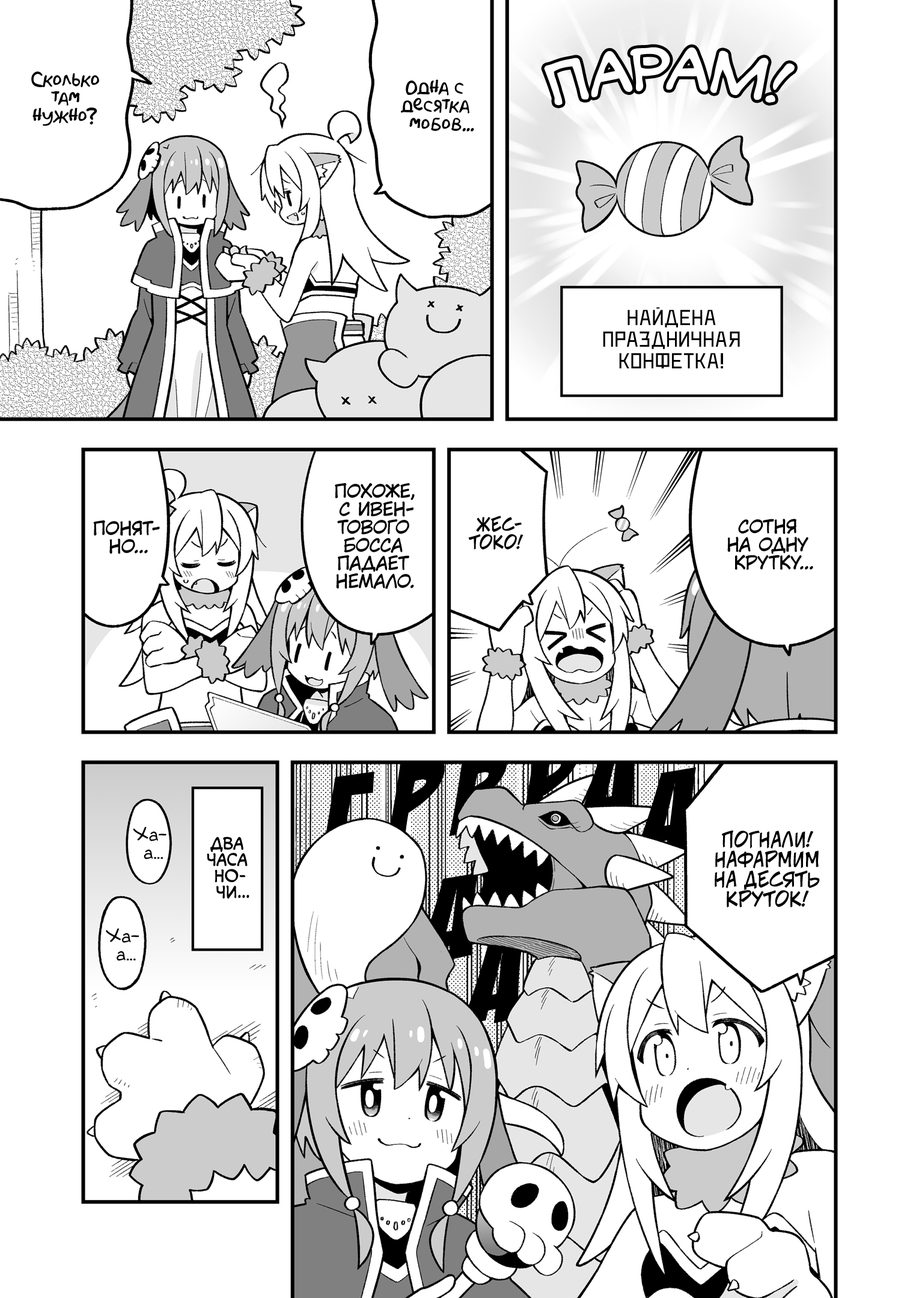
<style>
.page{position:relative;width:919px;height:1298px;background:#ffffff}
.page>*{position:absolute;margin:0}
.t1{font:54.1px "v_CCMonologous";color:#fefefe}
.t2{font:18px "AkbarPlain";color:#000000}
.t3{font:21.6px "DeadMetroC";color:#000000;text-transform:uppercase}
.t4{font:18px "KuraiVoice2";color:#000000;text-transform:uppercase}
.t5{font:18px "v_CCJeffCampbell";color:#000000;text-transform:uppercase}
.t6{font:126.2px "BadaBoom";text-transform:uppercase}
.t7{font:126.2px "BadaBoom";color:#000000;text-transform:uppercase}
.t8{font:18px "v_Augie";color:#000000}
.t9{font:19.8px "v_CCJeffCampbell";color:#000000;text-transform:uppercase}
.t10{font:16.2px "v_CCMonologous";color:#000000;text-transform:uppercase}
</style>
<div class="page">
<p class="t1" style="left:544px;top:47px;width:250px;height:58px">парам!</p>
<p class="t2" style="left:31px;top:72px;width:68px;height:54px;text-align:center">Сколько<br>там<br>нужно?</p>
<p class="t2" style="left:401px;top:79px;width:73px;height:53px;text-align:center">Одна с<br>десятка<br>мобов...</p>
<p class="t3" style="left:603px;top:307px;width:137px;height:61px;text-align:center">Найдена<br>праздничная<br>конфетка!</p>
<p class="t4" style="left:335px;top:483px;width:80px;height:106px;text-align:center">Похоже,<br>с ивен-<br>тового<br>босса<br>падает<br>немало.</p>
<p class="t4" style="left:93px;top:520px;width:67px;height:34px;text-align:center">Понят-<br>но...</p>
<p class="t5" style="left:468px;top:516px;width:55px;height:34px;text-align:center">Жес-<br>токо!</p>
<p class="t4" style="left:727px;top:519px;width:86px;height:51px;text-align:center">Сотня<br>на одну<br>крутку...</p>
<p class="t6" style="left:576px;top:738px;width:62px;height:89px">а</p>
<p class="t7" style="left:449px;top:750px;width:58px;height:86px">р</p>
<p class="t7" style="left:386px;top:757px;width:59px;height:87px">р</p>
<p class="t7" style="left:321px;top:772px;width:53px;height:87px">г</p>
<p class="t7" style="left:634px;top:767px;width:62px;height:89px">а</p>
<p class="t8" style="left:133px;top:827px;width:33px;height:32px;text-align:center">Ха-<br>а...</p>
<p class="t9" style="left:714px;top:830px;width:106px;height:77px;text-align:center">Погнали!<br>Нафармим<br>на десять<br>круток!</p>
<p class="t10" style="left:207px;top:836px;width:42px;height:63px;text-align:center">Два<br>часа<br>но-<br>чи...</p>
<p class="t7" style="left:416px;top:872px;width:62px;height:89px">а</p>
<p class="t8" style="left:106px;top:928px;width:33px;height:33px;text-align:center">Ха-<br>а...</p>
<p class="t7" style="left:461px;top:936px;width:62px;height:88px">а</p>
</div>
